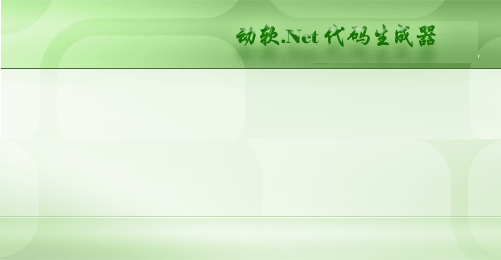
<style>
.page{position:relative;width:501px;height:260px}
.page>*{position:absolute;margin:0}
.t1{font:26px "STXingkai";color:#177306}
.t2{font:18px "Elephant-Regular";color:#177306}
</style>
<div class="page">
<p class="t1" style="left:236px;top:24px;width:200px;height:24px">动软<span class="t2">.Net </span>代码生成器</p>
</div>
